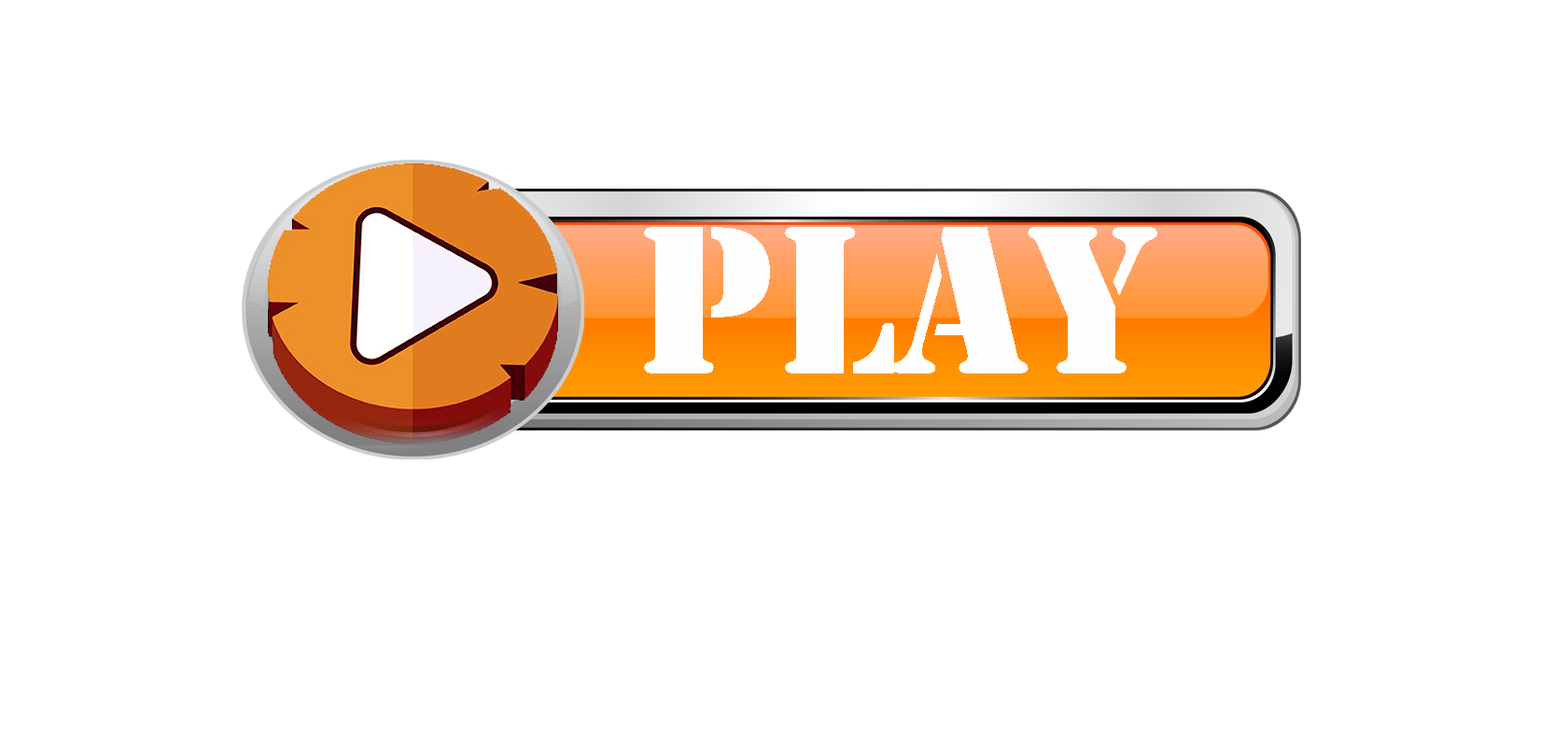
<style>
.page{position:relative;width:1568px;height:747px;background:#ffffff}
.page>*{position:absolute;margin:0}
.t1{font:196px "StencilStd";color:#fefefe}
</style>
<div class="page">
<p class="t1" style="left:644px;top:227px;width:513px;height:146px">Play</p>
</div>
